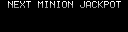
<style>
.page{position:relative;width:128px;height:32px;background:#000000}
.page>*{position:absolute;margin:0}
.t1{font:10px "Terminal"}
</style>
<div class="page">
<p class="t1" style="left:8px;top:1px;width:113px;height:7px">NEXT MINION JACKPOT</p>
</div>
